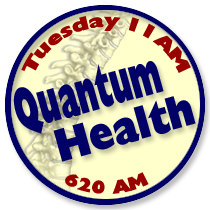
<style>
.page{position:relative;width:210px;height:210px;background:#ffffff}
.page>*{position:absolute;margin:0}
.t1{font:18px "Herald";letter-spacing:0.025em;color:#990000}
.t2{font:58.9px "Herald";letter-spacing:0.025em;color:#000066;scale:0.53 1}
.t3{font:45.9px "Herald";letter-spacing:0.025em;color:#000066;scale:0.89 1}
</style>
<div class="page">
<p class="t1" style="left:21px;top:16px;width:170px;height:57px">Tuesday 11AM</p>
<p class="t2" style="left:13px;top:61px;width:151px;height:73px;rotate:-16deg">Quantum</p>
<p class="t3" style="left:53px;top:96px;width:143px;height:66px;rotate:-16deg">Health</p>
<p class="t1" style="left:65px;top:172px;width:84px;height:22px">620 AM</p>
</div>
